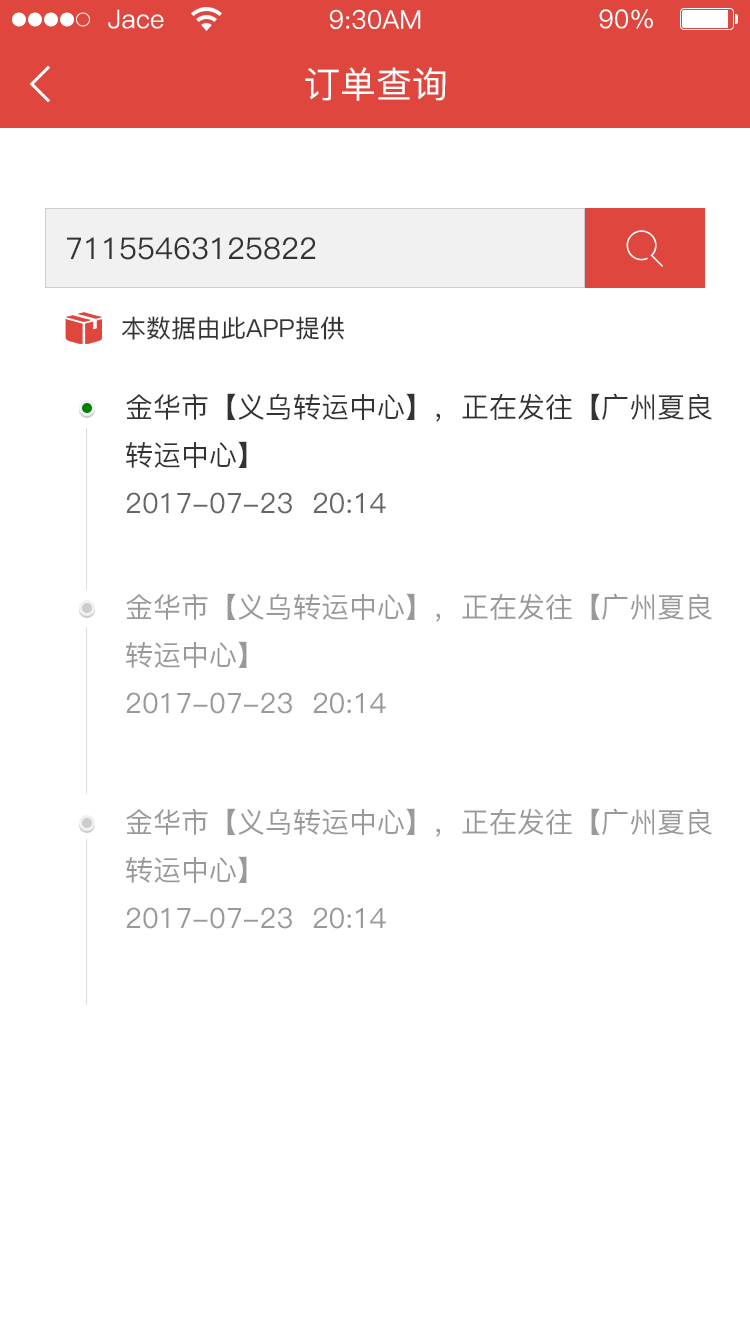
<style>
.page{position:relative;width:750px;height:1334px;background:#ffffff}
.page>*{position:absolute;margin:0}
.t1{font:36px "PingFang-SC-Medium";color:#ffffff}
.t2{font:30px "PingFang-SC-Medium";color:#333333}
.t3{font:25px "PingFang-SC-Medium";color:#333333}
.t4{font:28px/48px "PingFang-SC-Medium";color:#333333}
.t5{font:28px "PingFang-SC-Medium";color:#666666}
.t6{font:28px/48px "PingFang-SC-Medium";color:#999999}
.t7{font:28px "PingFang-SC-Medium";color:#999999}
</style>
<div class="page">
<p class="t1" style="left:305px;top:67px;width:141px;height:34px">订单查询</p>
<p class="t2" style="left:67px;top:237px;width:249px;height:23px">71155463125822</p>
<p class="t3" style="left:122px;top:316px;width:223px;height:24px">本数据由此APP提供</p>
<p class="t4" style="left:126px;top:393px;width:586px;height:75px">金华市【义乌转运中心】，正在发往【广州夏良<br>转运中心】</p>
<p class="t5" style="left:126px;top:492px;width:260px;height:22px">2017-07-23  20:14</p>
<p class="t6" style="left:126px;top:593px;width:586px;height:75px">金华市【义乌转运中心】，正在发往【广州夏良<br>转运中心】</p>
<p class="t7" style="left:126px;top:692px;width:260px;height:22px">2017-07-23  20:14</p>
<p class="t6" style="left:126px;top:808px;width:586px;height:75px">金华市【义乌转运中心】，正在发往【广州夏良<br>转运中心】</p>
<p class="t7" style="left:126px;top:907px;width:260px;height:22px">2017-07-23  20:14</p>
</div>
